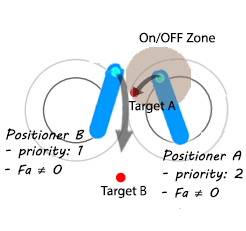
<style>
.page{position:relative;width:246px;height:231px;background:#ffffff}
.page>*{position:absolute;margin:0}
.t1{font:23.3px "MyriadPro-Regular";color:#000000}
.t2{font:23.3px "MVBoli";color:#000000}
</style>
<div class="page">
<p class="t1" style="left:139px;top:32px;width:76px;height:11px">On/OFF Zone</p>
<p class="t1" style="left:128px;top:101px;width:48px;height:13px">Target A</p>
<p class="t2" style="left:6px;top:128px;width:79px;height:12px">Positioner B</p>
<p class="t2" style="left:6px;top:145px;width:77px;height:14px">- priority: 1</p>
<p class="t2" style="left:163px;top:149px;width:79px;height:12px">Positioner A</p>
<p class="t2" style="left:5px;top:164px;width:57px;height:11px">- Fa <span class="t1">≠</span> 0</p>
<p class="t2" style="left:163px;top:168px;width:80px;height:14px">- priority: 2</p>
<p class="t1" style="left:100px;top:185px;width:47px;height:14px">Target B</p>
<p class="t2" style="left:162px;top:187px;width:57px;height:11px">- Fa <span class="t1">≠</span> 0</p>
</div>
